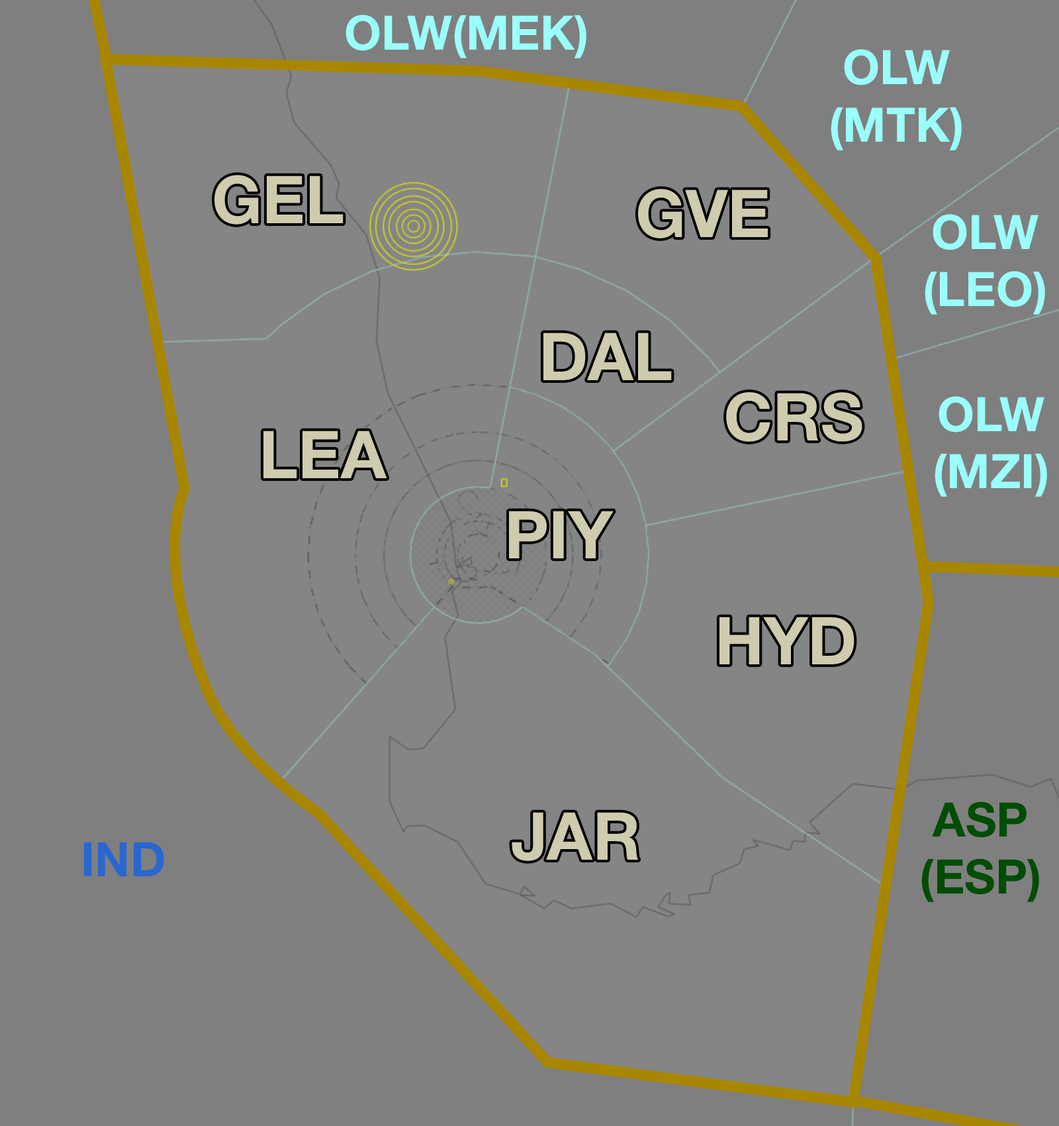
<style>
.page{position:relative;width:1059px;height:1126px;background:#858585}
.page>*{position:absolute;margin:0}
.t1{font:47.7px "HelveticaNeue-Bold";color:#9afffb}
.t2{font:66.2px "HelveticaNeue-Bold";color:#cfcbae}
.t3{font:47.7px "HelveticaNeue-Bold";color:#004d04}
.t4{font:47.7px "HelveticaNeue-Bold";color:#2967cf}
</style>
<div class="page">
<p class="t1" style="left:346px;top:15px;width:241px;height:43px">OLW(MEK)</p>
<p class="t1" style="left:831px;top:49px;width:131px;height:101px;text-align:center">OLW<br>(MTK)</p>
<p class="t2" style="left:215px;top:175px;width:129px;height:49px">GEL</p>
<p class="t2" style="left:638px;top:189px;width:130px;height:49px">GVE</p>
<p class="t1" style="left:925px;top:214px;width:120px;height:101px;text-align:center">OLW<br>(LEO)</p>
<p class="t2" style="left:544px;top:332px;width:128px;height:48px">DAL</p>
<p class="t2" style="left:726px;top:392px;width:137px;height:50px">CRS</p>
<p class="t1" style="left:935px;top:396px;width:112px;height:101px;text-align:center">OLW<br>(MZI)</p>
<p class="t2" style="left:264px;top:430px;width:123px;height:48px">LEA</p>
<p class="t2" style="left:509px;top:510px;width:105px;height:48px">PIY</p>
<p class="t2" style="left:720px;top:616px;width:135px;height:48px">HYD</p>
<p class="t3" style="left:922px;top:801px;width:118px;height:101px;text-align:center">ASP<br>(ESP)</p>
<p class="t2" style="left:512px;top:812px;width:127px;height:49px">JAR</p>
<p class="t4" style="left:84px;top:842px;width:80px;height:34px">IND</p>
</div>
